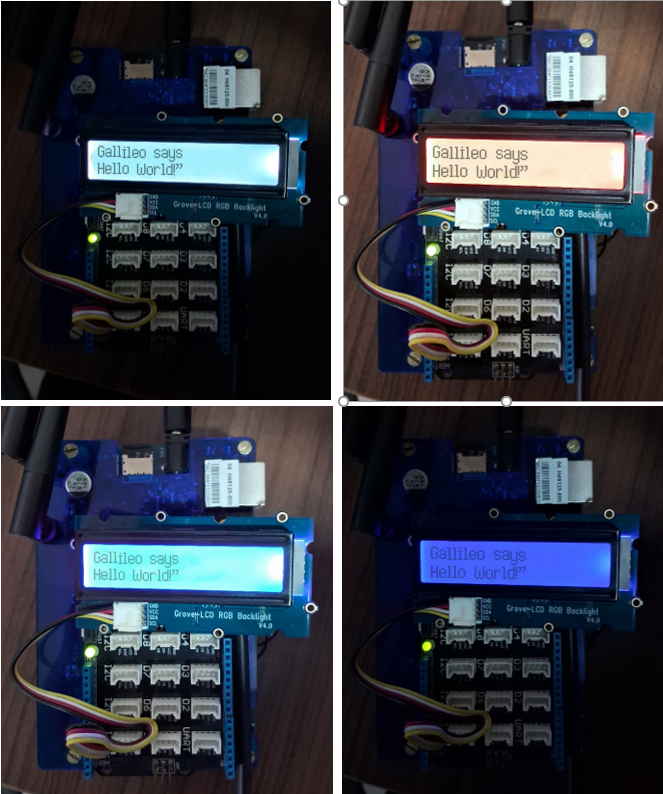
<style>
.page{position:relative;width:663px;height:794px}
.page>*{position:absolute;margin:0}
.t1{font:21.4px/17px "HighPixel-7";color:#58848b}
.t2{font:23.6px/18.7px "HighPixel-7";color:#8b8173}
.t3{font:21.4px/17px "HighPixel-7";color:#61b3b2}
</style>
<div class="page">
<p class="t1" style="left:97px;top:145px;width:86px;height:31px;rotate:1deg">Gallileo says<br>Hello World!”</p>
<p class="t2" style="left:432px;top:145px;width:96px;height:34px;rotate:1deg">Gallileo says<br>Hello World!”</p>
<p class="t3" style="left:93px;top:551px;width:86px;height:31px;rotate:1deg">Gallileo says<br>Hello World!”</p>
</div>
